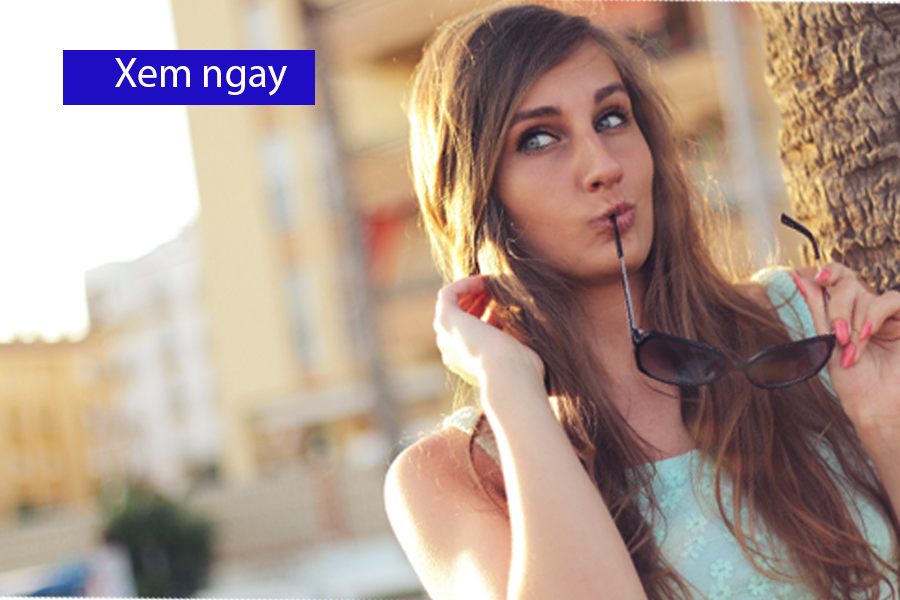
<style>
.page{position:relative;width:900px;height:600px}
.page>*{position:absolute;margin:0}
.t1{font:41.7px "MyriadPro-Regular";color:#ffffff}
</style>
<div class="page">
<p class="t1" style="left:115px;top:58px;width:172px;height:38px">Xem ngay</p>
</div>
